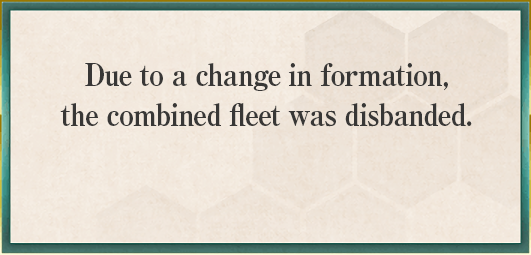
<style>
.page{position:relative;width:531px;height:255px}
.page>*{position:absolute;margin:0}
.t1{font:31px/40px "RyuminPro-ExBold";letter-spacing:-0.04em;color:#383736;scale:0.9 1}
</style>
<div class="page">
<p class="t1" style="left:60px;top:63px;width:412px;height:64px;text-align:center">Due to a change in formation,<br>the combined fleet was disbanded.</p>
</div>
